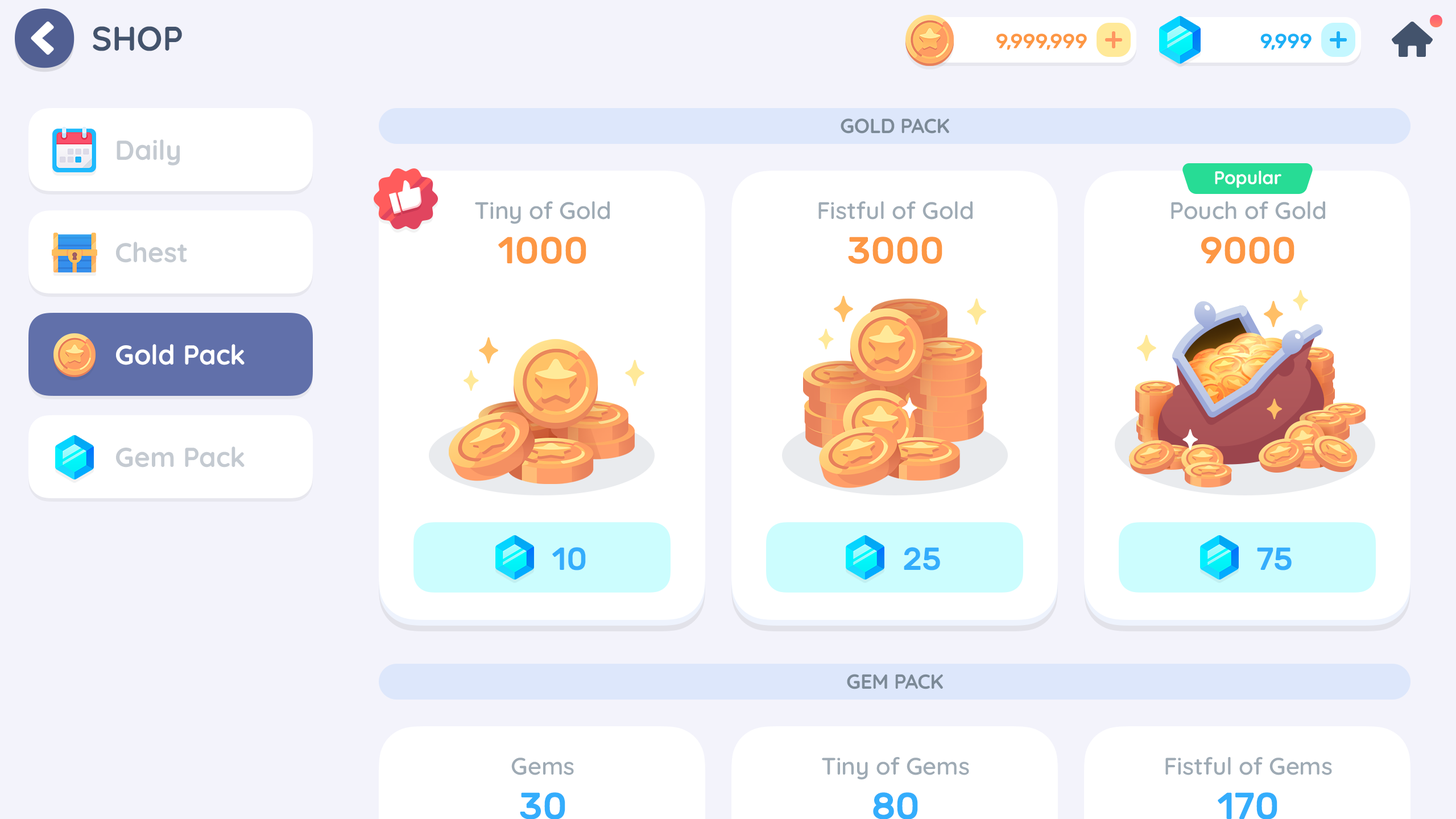
<style>
.page{position:relative;width:1456px;height:819px;background:#f3f3fb}
.page>*{position:absolute;margin:0}
.t1{font:34.1px "Quicksand-Bold";color:#43536c}
.t2{font:20.5px "Rubik-Medium";letter-spacing:-0.01em;color:#fd9744;text-transform:uppercase}
.t3{font:20.5px "Rubik-Medium";letter-spacing:-0.01em;color:#1cb0f6;text-transform:uppercase}
.t4{font:20.5px "Quicksand-Bold";letter-spacing:-0.01em;color:#7c8a97;text-transform:uppercase}
.t5{font:27.3px "Quicksand-Bold";color:#c4cad1}
.t6{font:18.2px "Quicksand-Bold";letter-spacing:-0.01em;color:#ffffff}
.t7{font:23.9px "Quicksand-SemiBold";color:#9eaab4}
.t8{font:37.5px "Rubik-Medium";color:#fd9744}
.t9{font:27.3px "Quicksand-Bold";color:#ffffff}
.t10{font:31.8px "Rubik-Medium";color:#34adfc}
</style>
<div class="page">
<p class="t1" style="left:93px;top:26px;width:89px;height:25px">SHOP</p>
<p class="t2" style="left:996px;top:34px;width:91px;height:16px">9,999,999</p>
<p class="t3" style="left:1260px;top:34px;width:52px;height:16px">9,999</p>
<p class="t4" style="left:841px;top:118px;width:108px;height:16px">Gold Pack</p>
<p class="t5" style="left:117px;top:139px;width:63px;height:27px">Daily</p>
<p class="t6" style="left:1215px;top:171px;width:66px;height:17px">Popular</p>
<p class="t7" style="left:475px;top:201px;width:135px;height:23px">Tiny of Gold</p>
<p class="t7" style="left:818px;top:201px;width:155px;height:19px">Fistful of Gold</p>
<p class="t7" style="left:1171px;top:201px;width:154px;height:19px">Pouch of Gold</p>
<p class="t5" style="left:116px;top:242px;width:71px;height:21px">Chest</p>
<p class="t8" style="left:498px;top:237px;width:88px;height:27px">1000</p>
<p class="t8" style="left:848px;top:237px;width:94px;height:27px">3000</p>
<p class="t8" style="left:1201px;top:237px;width:93px;height:27px">9000</p>
<p class="t9" style="left:116px;top:344px;width:129px;height:21px">Gold Pack</p>
<p class="t5" style="left:116px;top:446px;width:129px;height:22px">Gem Pack</p>
<p class="t10" style="left:552px;top:547px;width:34px;height:23px">10</p>
<p class="t10" style="left:904px;top:547px;width:36px;height:23px">25</p>
<p class="t10" style="left:1257px;top:547px;width:35px;height:23px">75</p>
</div>
